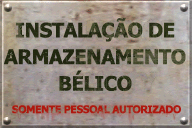
<style>
.page{position:relative;width:192px;height:128px}
.page>*{position:absolute;margin:0}
.t1{font:20px/26.7px "Tahoma-Bold";letter-spacing:-0.02em;color:#293118;text-transform:uppercase}
.t2{font:10.3px "Tahoma-Bold";letter-spacing:-0.045em;color:#b01209;text-transform:uppercase;font-weight:bold}
</style>
<div class="page">
<p class="t1" style="left:4px;top:18px;width:182px;height:74px;text-align:center">Instalação de<br>armazenamento<br>BÉLICO</p>
<p class="t2" style="left:12px;top:105px;width:169px;height:9px;opacity:0.95">Somente pessoal autorizado</p>
</div>
